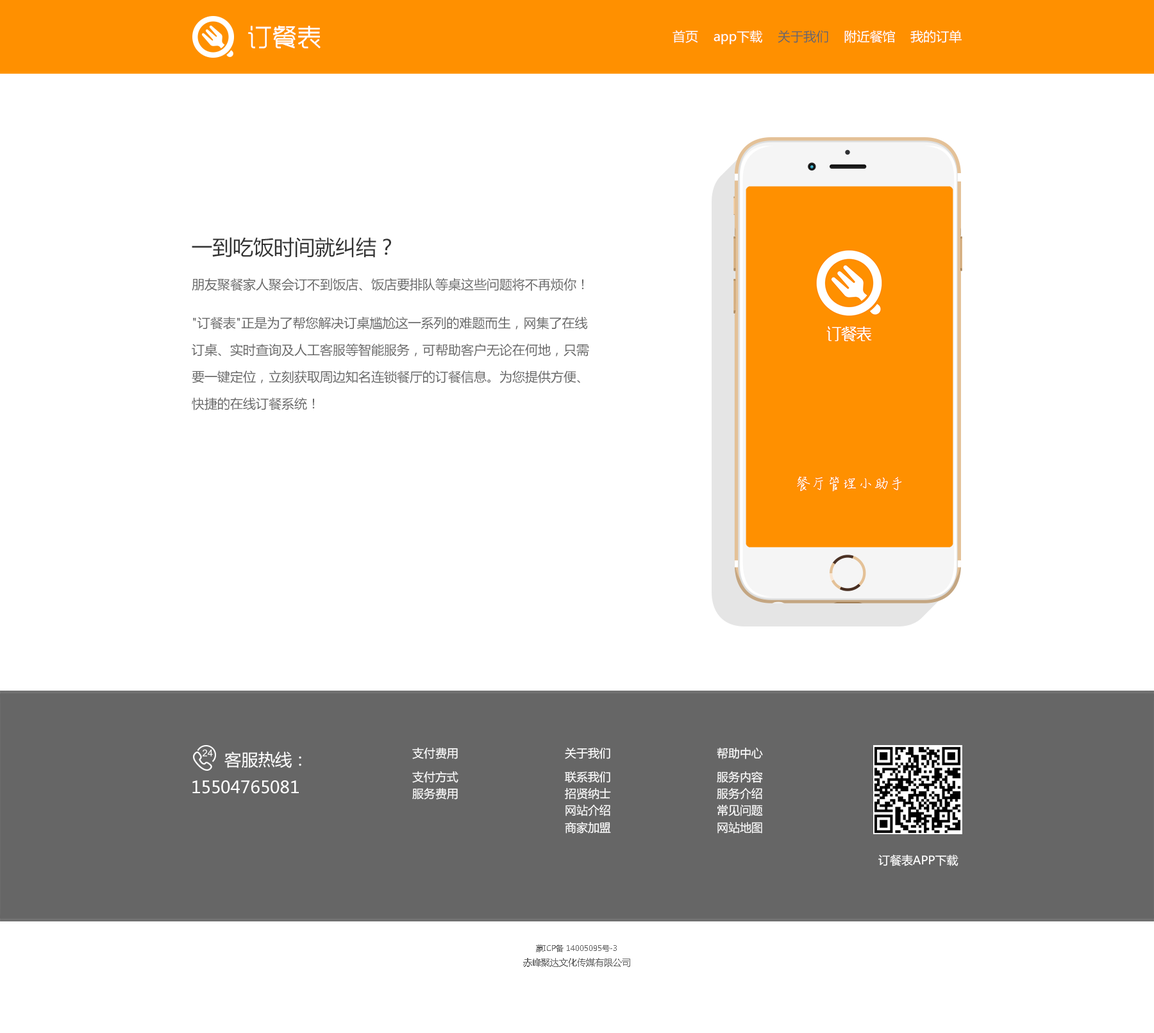
<style>
.page{position:relative;width:1154px;height:1033px;background:#ffffff}
.page>*{position:absolute;margin:0}
.t1{font:24.5px "MFYueHei_Noncommercial-Regular";color:#ffffff}
.t2{font:12.8px "MicrosoftYaHei";color:#ffffff}
.t3{font:12.8px "MicrosoftYaHei";color:#fcfcfc}
.t4{font:12.8px "MicrosoftYaHei";color:#666666}
.t5{font:12.8px/26.9px "MicrosoftYaHei";color:#666666}
.t6{font:20.5px/41px "MicrosoftYaHei";color:#333333}
.t7{font:12.8px/24.4px "MicrosoftYaHei";color:#666666}
.t8{font:11.5px/16.9px "MicrosoftYaHei";color:#ffffff}
.t9{font:11.5px/23.7px "MicrosoftYaHei";color:#ffffff}
.t10{font:16.7px "MicrosoftYaHei";color:#ffffff}
.t11{font:11.5px "MicrosoftYaHei";color:#ffffff}
.t12{font:7.7px "MicrosoftYaHei";color:#666666}
.t13{font:9px "MicrosoftYaHei";color:#666666}
</style>
<div class="page">
<p class="t1" style="left:248px;top:26px;width:73px;height:23px">订餐表</p>
<p class="t2" style="left:673px;top:30px;width:289px;height:14px"><span class="t3">首页    </span>app下载    <span class="t4">关于我们    </span>附近餐馆    我的订单</p>
<p class="t5" style="left:192px;top:237px;width:397px;height:173px;text-align:justify"><span class="t6">一到吃饭时间就纠结？<br></span><span class="t7">朋友聚餐家人聚会订不到饭店、饭店要排队等桌这些问题将不再烦你！<br><br></span>"订餐表"正是为了帮您解决订桌尴尬这一系列的难题而生，网集了在线<br>订桌、实时查询及人工客服等智能服务，可帮助客户无论在何地，只需<br>要一键定位，立刻获取周边知名连锁餐厅的订餐信息。为您提供方便、<br>快捷的在线订餐系统！</p>
<p class="t8" style="left:412px;top:747px;width:46px;height:53px"><span class="t9">支付费用<br></span>支付方式<br>服务费用</p>
<p class="t8" style="left:565px;top:747px;width:46px;height:87px"><span class="t9">关于我们<br></span>联系我们<br>招贤纳士<br>网站介绍<br>商家加盟</p>
<p class="t8" style="left:717px;top:748px;width:46px;height:86px"><span class="t9">帮助中心<br></span>服务内容<br>服务介绍<br>常见问题<br>网站地图</p>
<p class="t10" style="left:224px;top:752px;width:77px;height:16px">客服热线：</p>
<p class="t10" style="left:192px;top:780px;width:107px;height:14px">15504765081</p>
<p class="t11" style="left:879px;top:854px;width:80px;height:12px">订餐表APP下载</p>
<p class="t12" style="left:536px;top:945px;width:81px;height:7px">蒙ICP备 14005095号-3</p>
<p class="t13" style="left:523px;top:958px;width:107px;height:9px">赤峰聚达文化传媒有限公司</p>
</div>
